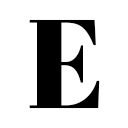
<style>
.page{position:relative;width:128px;height:128px;background:#ffffff}
.page>*{position:absolute;margin:0}
.t1{font:125px "AbrilFatface-Regular";color:#000000}
</style>
<div class="page">
<p class="t1" style="left:29px;top:19px;width:71px;height:90px">E</p>
</div>
